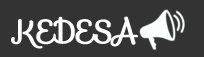
<style>
.page{position:relative;width:204px;height:57px;background:#333333}
.page>*{position:absolute;margin:0}
.t1{font:42.8px "Sofia-Regular";color:#ffffff;font-variant:small-caps;font-weight:bold}
</style>
<div class="page">
<p class="t1" style="left:11px;top:16px;width:128px;height:33px">kedesa</p>
</div>
